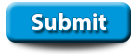
<style>
.page{position:relative;width:137px;height:54px;background:#0098db}
.page>*{position:absolute;margin:0}
.t1{font:23.9px "MyriadPro-Bold";color:#ffffff}
</style>
<div class="page">
<p class="t1" style="left:31px;top:13px;width:75px;height:17px">Submit</p>
</div>
